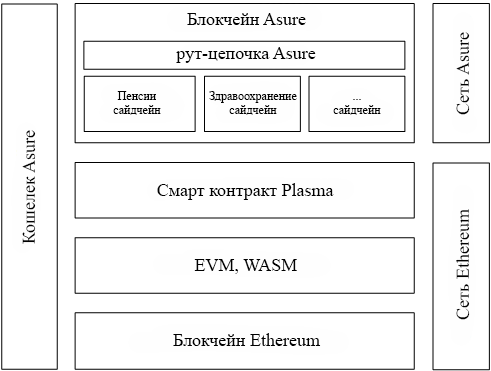
<style>
.page{position:relative;width:491px;height:371px;background:#ffffff}
.page>*{position:absolute;margin:0}
.t1{font:18px "TimesNewRomanPSMT";color:#000000}
.t2{font:12px "TimesNewRomanPSMT";color:#000000}
</style>
<div class="page">
<p class="t1" style="left:187px;top:13px;width:119px;height:12px">Блокчейн Asure</p>
<p class="t1" style="left:456px;top:32px;width:14px;height:83px;rotate:-90deg">Сеть Asure</p>
<p class="t1" style="left:176px;top:47px;width:140px;height:16px">рут-цепочка Asure</p>
<p class="t2" style="left:113px;top:91px;width:48px;height:24px;text-align:center">Пенсии<br>сайдчейн</p>
<p class="t2" style="left:209px;top:91px;width:88px;height:24px;text-align:center">Здравоохранение<br>сайдчейн</p>
<p class="t2" style="left:333px;top:99px;width:48px;height:16px;text-align:center">...<br>сайдчейн</p>
<p class="t1" style="left:22px;top:130px;width:14px;height:114px;rotate:-90deg">Кошелек Asure</p>
<p class="t1" style="left:157px;top:183px;width:177px;height:17px">Смарт контракт Plasma</p>
<p class="t1" style="left:456px;top:209px;width:14px;height:111px;rotate:-90deg">Сеть Ethereum</p>
<p class="t1" style="left:194px;top:259px;width:103px;height:15px">EVM, WASM</p>
<p class="t1" style="left:173px;top:333px;width:148px;height:13px">Блокчейн Ethereum</p>
</div>
